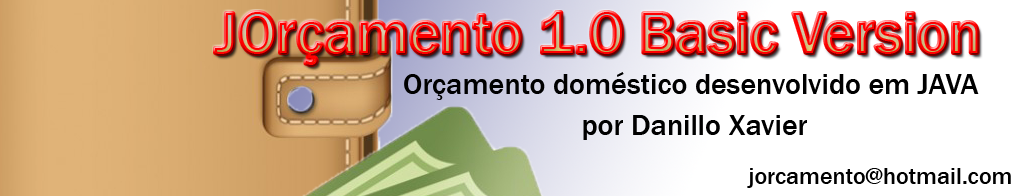
<style>
.page{position:relative;width:1024px;height:196px;background:#ffffff}
.page>*{position:absolute;margin:0}
.t1{font:60px "FranklinGothic-Medium"}
.t2{font:30px "FranklinGothic-Medium";color:#000000}
.t3{font:24px "FranklinGothic-Medium";color:#000000}
</style>
<div class="page">
<p class="t1" style="left:215px;top:12px;width:763px;height:53px">JOrçamento 1.0 Basic Version</p>
<p class="t2" style="left:404px;top:72px;width:575px;height:68px;text-align:center">Orçamento doméstico desenvolvido em JAVA <br>por Danillo Xavier</p>
<p class="t3" style="left:747px;top:168px;width:264px;height:20px">jorcamento@hotmail.com</p>
</div>
